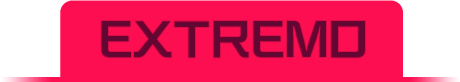
<style>
.page{position:relative;width:460px;height:82px;background:#fd0e51}
.page>*{position:absolute;margin:0}
.t1{font:41.3px "KafuTechnoStd-HV";letter-spacing:0.026em;color:#610734}
</style>
<div class="page">
<p class="t1" style="left:101px;top:21px;width:264px;height:37px">EXTREMO</p>
</div>
